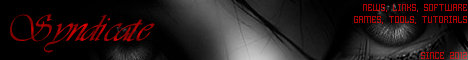
<style>
.page{position:relative;width:468px;height:60px;background:#000000}
.page>*{position:absolute;margin:0}
.t1{font:10px "HomespunTTBRK";color:#ae0101}
.t2{font:36px "Astrania"}
</style>
<div class="page">
<p class="t1" style="left:354px;top:4px;width:113px;height:55px;text-align:right">NEWS, LINKS, SOFTWARE<br>GAMES, TOOLS, TUTORIALS<br><br><br>SINCE 2012</p>
<p class="t2" style="left:10px;top:14px;width:145px;height:39px">Syndicate</p>
</div>
